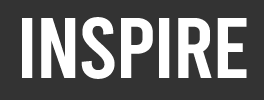
<style>
.page{position:relative;width:264px;height:100px;background:#333333}
.page>*{position:absolute;margin:0}
.t1{font:85.5px "Bebas-Regular";letter-spacing:-0.02em;color:#ffffff;scale:1.11 1}
</style>
<div class="page">
<p class="t1" style="left:22px;top:17px;width:225px;height:62px">INSPIRE</p>
</div>
